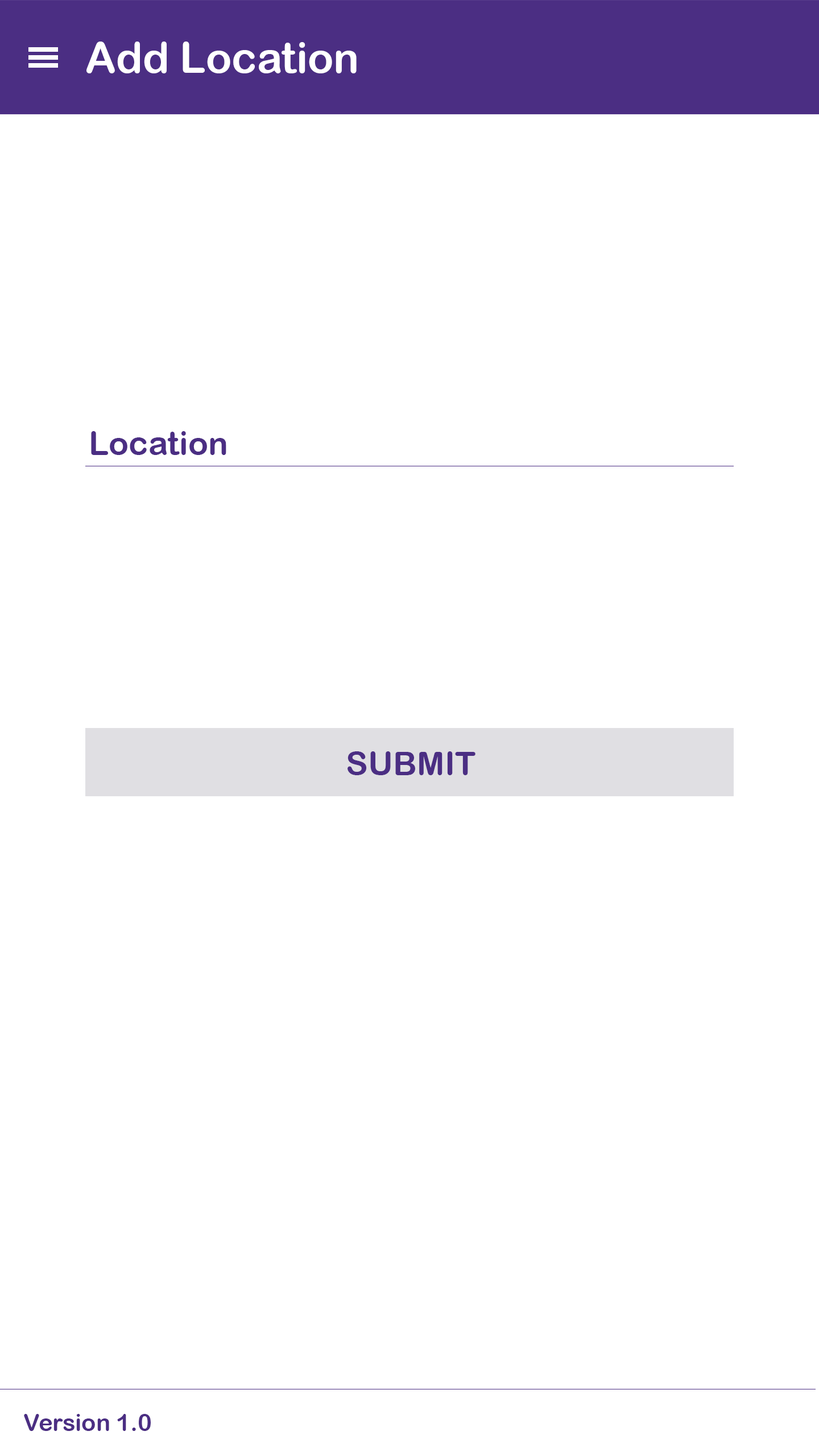
<style>
.page{position:relative;width:819px;height:1456px;background:#ffffff}
.page>*{position:absolute;margin:0}
.t1{font:42.7px "ArialRoundedMTBold";color:#ffffff}
.t2{font:33.2px "ArialRoundedMTBold";color:#4b2e83}
.t3{font:23.7px "ArialRoundedMTBold";color:#4b2e83}
</style>
<div class="page">
<p class="t1" style="left:86px;top:42px;width:271px;height:31px">Add Location</p>
<p class="t2" style="left:91px;top:431px;width:135px;height:24px">Location</p>
<p class="t2" style="left:348px;top:751px;width:127px;height:24px">SUBMIT</p>
<p class="t3" style="left:24px;top:1414px;width:127px;height:17px">Version 1.0</p>
</div>
